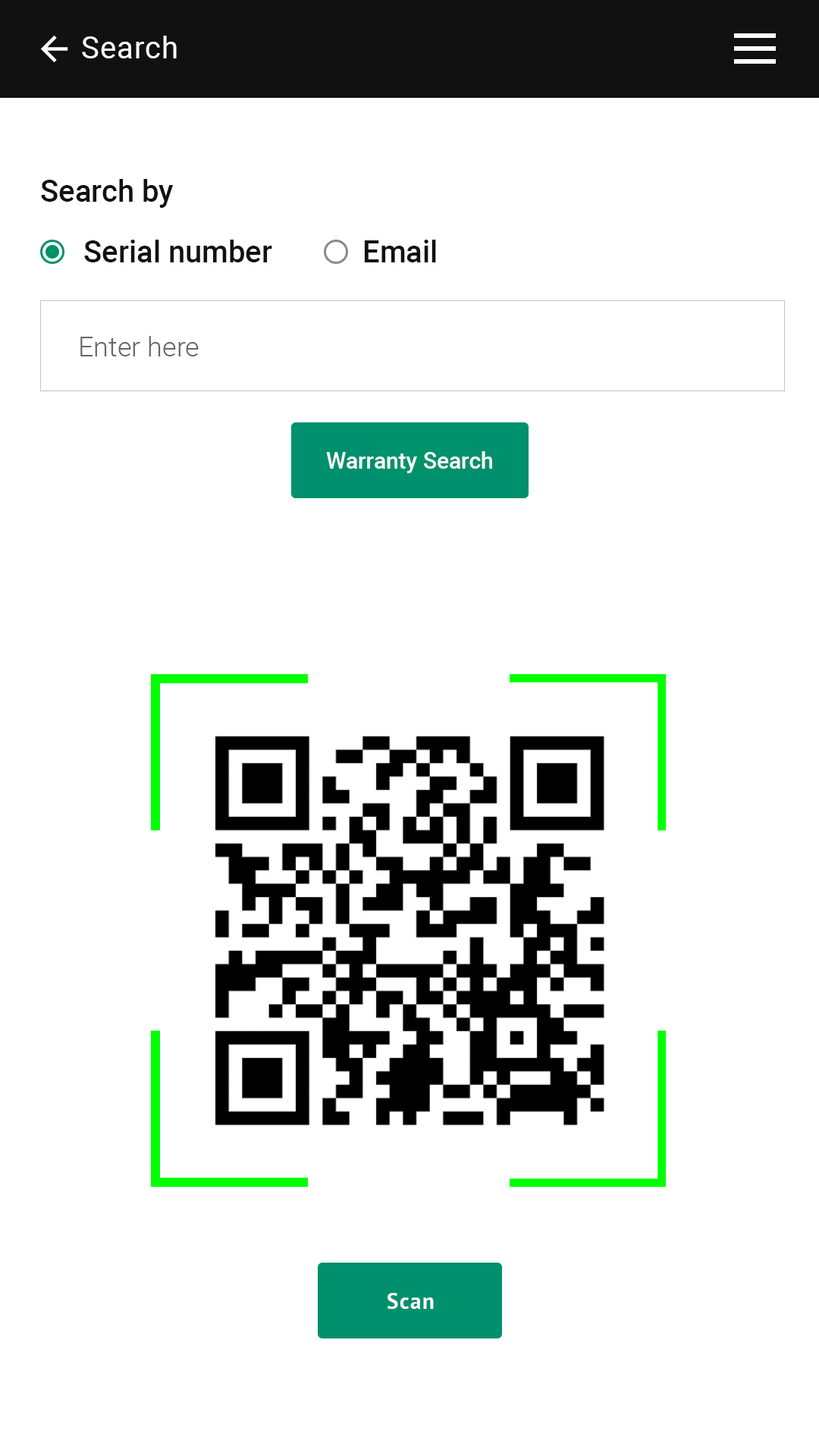
<style>
.page{position:relative;width:819px;height:1456px;background:#ffffff}
.page>*{position:absolute;margin:0}
.t1{font:30.3px "Roboto-Regular";letter-spacing:0.03em;color:#ffffff}
.t2{font:30.3px "Roboto-Medium";color:#111111}
.t3{font:27.3px "Roboto-Light";color:#666666}
.t4{font:37.9px "PTSans-Bold";letter-spacing:0.05em;color:#ffffff}
</style>
<div class="page">
<p class="t1" style="left:82px;top:36px;width:95px;height:22px">Search</p>
<p class="t2" style="left:41px;top:179px;width:133px;height:29px">Search by</p>
<p class="t2" style="left:84px;top:240px;width:188px;height:22px">Serial number</p>
<p class="t2" style="left:364px;top:240px;width:72px;height:22px">Email</p>
<p class="t3" style="left:80px;top:336px;width:119px;height:20px">Enter here</p>
<p class="t4" style="left:387px;top:1293px;width:47px;height:16px">Scan</p>
</div>
